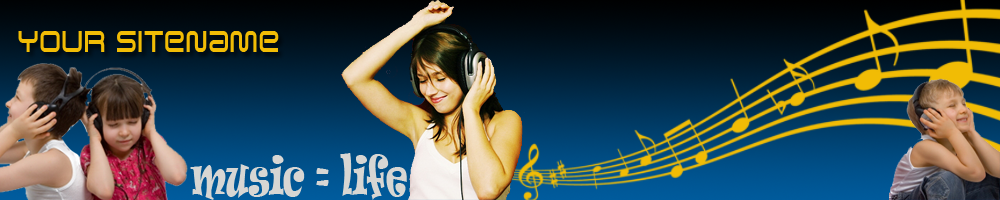
<style>
.page{position:relative;width:1000px;height:200px}
.page>*{position:absolute;margin:0}
.t1{font:36px "SavedByZero";color:#f1bc05;scale:0.76 1}
.t2{font:50.4px "Ravie";color:#d7d6d3;scale:0.57 1}
</style>
<div class="page">
<p class="t1" style="left:18px;top:31px;width:261px;height:21px">Your Sitename</p>
<p class="t2" style="left:190px;top:153px;width:217px;height:47px">music = life</p>
</div>
